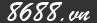
<style>
.page{position:relative;width:97px;height:23px;background:#333333}
.page>*{position:absolute;margin:0}
.t1{font:30px "BrushScriptMT";color:#ffffff}
</style>
<div class="page">
<p class="t1" style="left:7px;top:2px;width:83px;height:19px">8688.vn</p>
</div>
